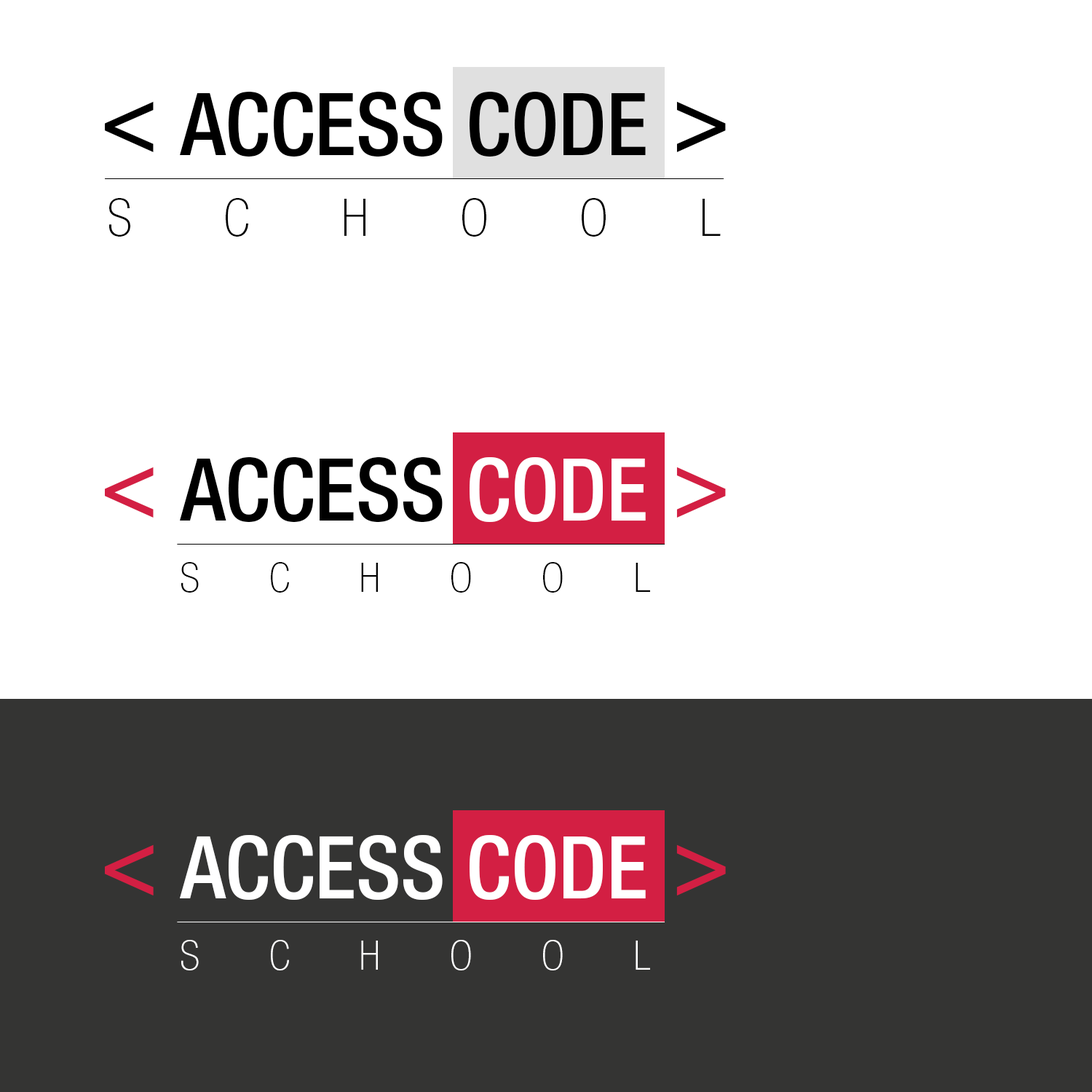
<style>
.page{position:relative;width:1092px;height:1092px;background:#ffffff}
.page>*{position:absolute;margin:0}
.t1{font:95.8px "HelveticaNeueLTStd-MdCn";color:#000000}
.t2{font:86.3px "HelveticaNeueLTStd-MdCn";color:#000000}
.t3{font:52.4px "HelveticaNeueLTStd-ThCn";letter-spacing:1.75em;color:#000000}
.t4{font:86.3px "HelveticaNeueLTStd-MdCn";color:#ffffff}
.t5{font:95.8px "HelveticaNeueLTStd-MdCn";color:#d31f43}
.t6{font:41.2px "HelveticaNeueLTStd-ThCn";letter-spacing:1.67em;color:#000000}
.t7{font:41.2px "HelveticaNeueLTStd-ThCn";letter-spacing:1.67em;color:#ffffff}
</style>
<div class="page">
<p class="t1" style="left:105px;top:101px;width:49px;height:51px">&lt;</p>
<p class="t2" style="left:180px;top:92px;width:466px;height:65px">ACCESS CODE</p>
<p class="t1" style="left:676px;top:101px;width:50px;height:51px">&gt;</p>
<p class="t3" style="left:109px;top:198px;width:612px;height:39px">SCHOOL</p>
<p class="t2" style="left:180px;top:457px;width:466px;height:66px">ACCESS <span class="t4">CODE</span></p>
<p class="t5" style="left:105px;top:467px;width:49px;height:51px">&lt;</p>
<p class="t5" style="left:676px;top:467px;width:50px;height:51px">&gt;</p>
<p class="t6" style="left:181px;top:562px;width:469px;height:31px">SCHOOL</p>
<p class="t5" style="left:105px;top:844px;width:49px;height:51px">&lt;</p>
<p class="t4" style="left:180px;top:835px;width:466px;height:66px">ACCESS CODE</p>
<p class="t5" style="left:676px;top:844px;width:50px;height:51px">&gt;</p>
<p class="t7" style="left:181px;top:940px;width:469px;height:30px">SCHOOL</p>
</div>
